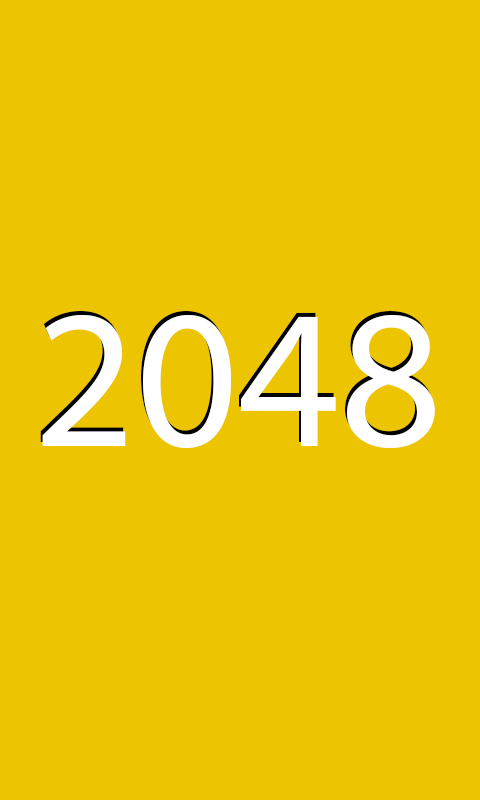
<style>
.page{position:relative;width:480px;height:800px;background:#ecc400}
.page>*{position:absolute;margin:0}
.t1{font:198.7px "MyriadPro-Regular";color:#ffffff}
</style>
<div class="page">
<p class="t1" style="left:40px;top:311px;width:393px;height:134px">2048</p>
<p class="t1" style="left:42px;top:315px;width:393px;height:134px">2048</p>
</div>
